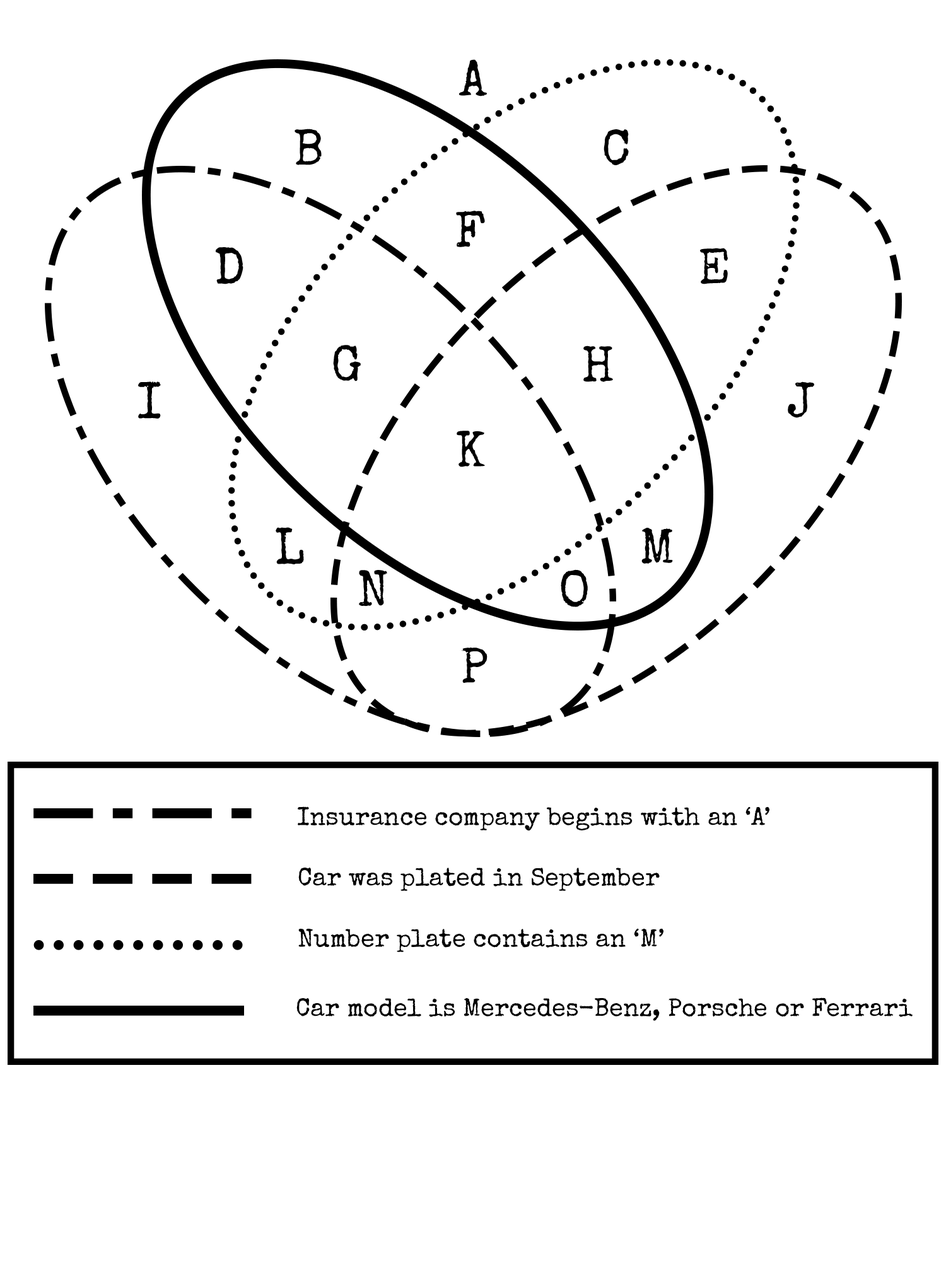
<style>
.page{position:relative;width:946px;height:1261px;background:#ffffff}
.page>*{position:absolute;margin:0}
.t1{font:50.4px "SpecialElite-Regular";color:#000000}
.t2{font:25.2px "SpecialElite-Regular";color:#000000}
</style>
<div class="page">
<p class="t1" style="left:459px;top:59px;width:28px;height:37px">A</p>
<p class="t1" style="left:294px;top:129px;width:28px;height:36px">B</p>
<p class="t1" style="left:603px;top:129px;width:26px;height:36px">C</p>
<p class="t1" style="left:456px;top:211px;width:29px;height:36px">F</p>
<p class="t1" style="left:216px;top:247px;width:27px;height:37px">D</p>
<p class="t1" style="left:700px;top:248px;width:28px;height:36px">E</p>
<p class="t1" style="left:333px;top:345px;width:28px;height:36px">G</p>
<p class="t1" style="left:583px;top:345px;width:30px;height:37px">H</p>
<p class="t1" style="left:138px;top:381px;width:23px;height:38px">I</p>
<p class="t1" style="left:787px;top:381px;width:27px;height:37px">J</p>
<p class="t1" style="left:456px;top:431px;width:29px;height:36px">K</p>
<p class="t1" style="left:276px;top:527px;width:28px;height:37px">L</p>
<p class="t1" style="left:641px;top:527px;width:32px;height:37px">M</p>
<p class="t1" style="left:359px;top:570px;width:28px;height:37px">N</p>
<p class="t1" style="left:560px;top:569px;width:28px;height:38px">O</p>
<p class="t1" style="left:461px;top:647px;width:26px;height:36px">P</p>
<p class="t2" style="left:298px;top:806px;width:472px;height:25px">Insurance company begins with an ‘A’</p>
<p class="t2" style="left:298px;top:868px;width:361px;height:23px">Car was plated in September</p>
<p class="t2" style="left:298px;top:928px;width:366px;height:24px">Number plate contains an ‘M’</p>
<p class="t2" style="left:296px;top:997px;width:616px;height:24px">Car model is Mercedes-Benz, Porsche or Ferrari</p>
</div>
